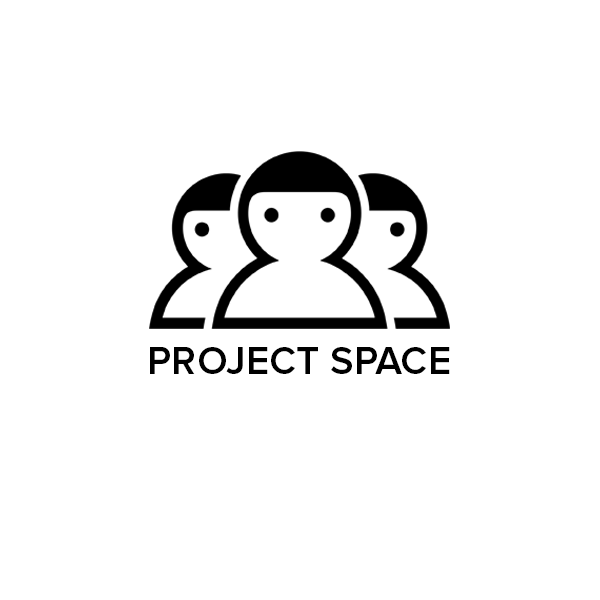
<style>
.page{position:relative;width:600px;height:600px;background:#ffffff}
.page>*{position:absolute;margin:0}
.t1{font:40.2px "ProximaNova-Semibold";color:#000000}
</style>
<div class="page">
<p class="t1" style="left:150px;top:347px;width:300px;height:27px">PROJECT SPACE</p>
</div>
